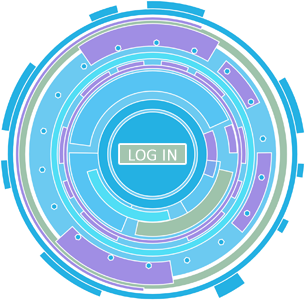
<style>
.page{position:relative;width:305px;height:300px;background:#ffffff}
.page>*{position:absolute;margin:0}
.t1{font:17px "Calibri-Light";color:#ffffff;text-transform:uppercase;font-weight:bold}
</style>
<div class="page">
<p class="t1" style="left:129px;top:149px;width:48px;height:12px">Log in</p>
</div>
